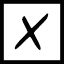
<style>
.page{position:relative;width:64px;height:64px;background:#ffffff}
.page>*{position:absolute;margin:0}
.t1{font:60px "IsaacSans";color:#040404}
</style>
<div class="page">
<p class="t1" style="left:14px;top:13px;width:35px;height:37px">X</p>
</div>
